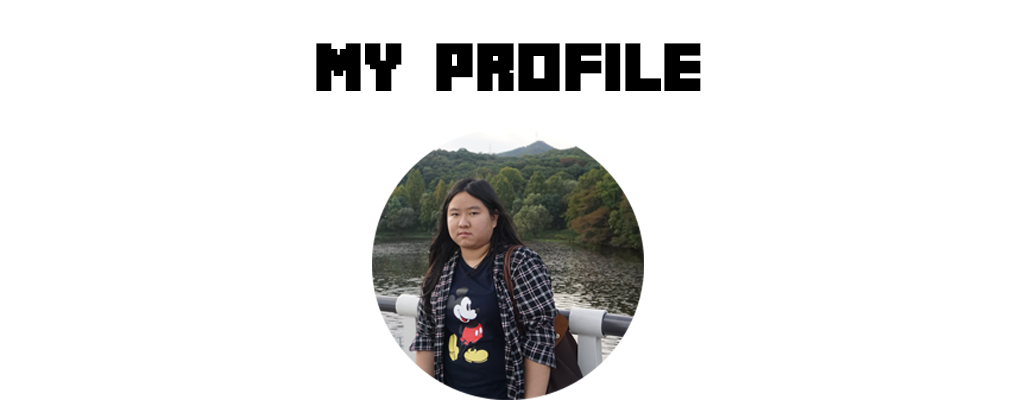
<style>
.page{position:relative;width:1024px;height:400px;background:#ffffff}
.page>*{position:absolute;margin:0}
.t1{font:61.1px "Minecrafter";color:#000000}
</style>
<div class="page">
<p class="t1" style="left:316px;top:43px;width:385px;height:48px">My profile</p>
</div>
